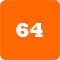
<style>
.page{position:relative;width:60px;height:60px;background:#ff6900}
.page>*{position:absolute;margin:0}
.t1{font:20.8px "Rockwell-ExtraBold";color:#ffffff}
</style>
<div class="page">
<p class="t1" style="left:16px;top:23px;width:27px;height:14px">64</p>
</div>
